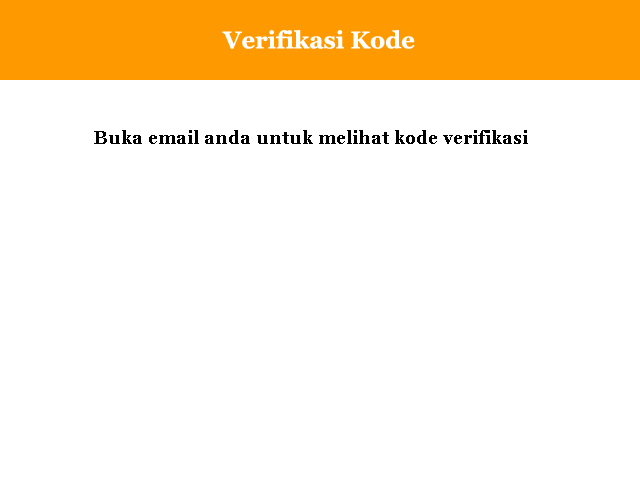
<style>
.page{position:relative;width:640px;height:480px;background:#ffffff}
.page>*{position:absolute;margin:0}
.t1{font:24px "Georgia-Bold";color:#ffffff}
.t2{font:18px "Georgia-Bold";color:#000000}
</style>
<div class="page">
<p class="t1" style="left:222px;top:30px;width:193px;height:19px">Verifikasi Kode</p>
<p class="t2" style="left:94px;top:130px;width:434px;height:14px">Buka email anda untuk melihat kode verifikasi</p>
</div>
